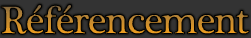
<style>
.page{position:relative;width:251px;height:38px;background:#333333}
.page>*{position:absolute;margin:0}
.t1{font:40px "PlantagenetCherokee";letter-spacing:-0.07em;font-weight:bold}
</style>
<div class="page">
<p class="t1" style="left:0px;top:3px;width:250px;height:32px">Référencement</p>
</div>
